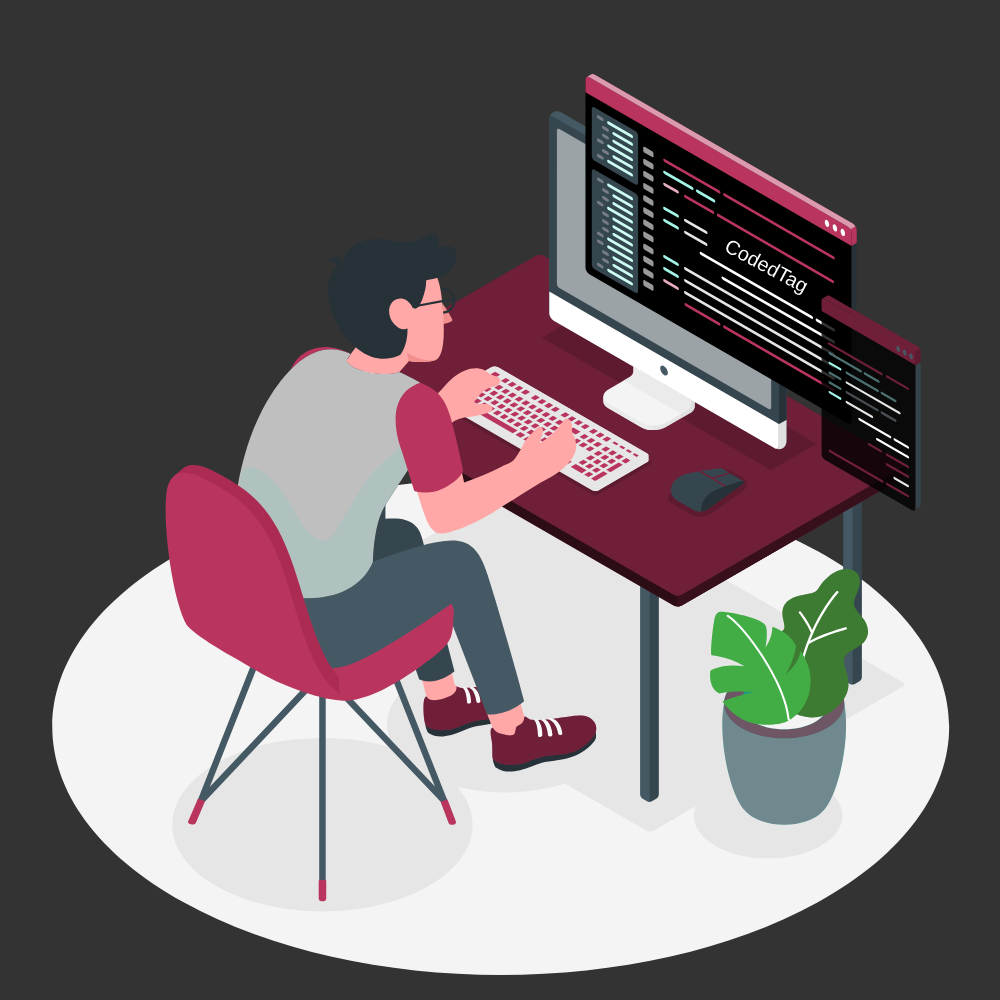
<style>
.page{position:relative;width:1000px;height:1000px;background:#333333}
.page>*{position:absolute;margin:0}
.t1{font:20px "ArialMT";color:#ffffff}
</style>
<div class="page">
<p class="t1" style="left:726px;top:240px;width:82px;height:55px;rotate:28deg">CodedTag</p>
</div>
